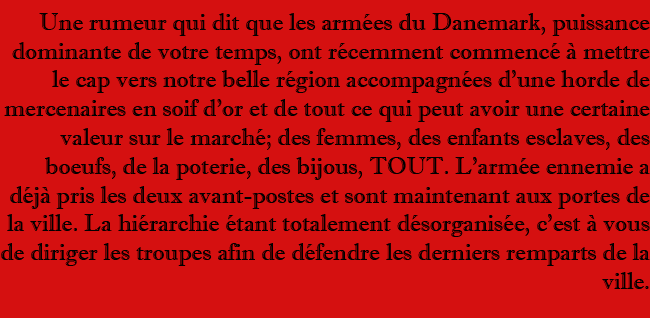
<style>
.page{position:relative;width:650px;height:318px;background:#d51010}
.page>*{position:absolute;margin:0}
.t1{font:24px "ImprintMT-Shadow";color:#000000}
</style>
<div class="page">
<p class="t1" style="left:1px;top:13px;width:649px;height:276px;text-align:right">Une rumeur qui dit que les armées du Danemark, puissance dominante de votre temps, ont récemment commencé à mettre le cap vers notre belle région accompagnées d’une horde de mercenaires en soif d’or et de tout ce qui peut avoir une certaine valeur sur le marché; des femmes, des enfants esclaves, des boeufs, de la poterie, des bijous, TOUT. L'armée ennemie a déjà pris les deux avant-postes et sont maintenant aux portes de la ville. La hiérarchie étant totalement désorganisée, c'est à vous de diriger les troupes afin de défendre les derniers remparts de la ville.</p>
</div>
